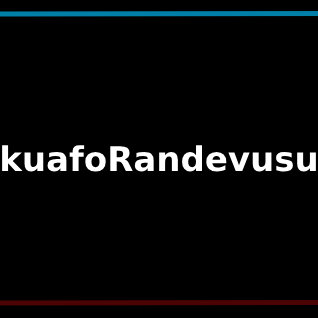
<style>
.page{position:relative;width:318px;height:318px;background:#000000}
.page>*{position:absolute;margin:0}
.t1{font:34px "DejaVuSans-Bold";color:#ffffff}
</style>
<div class="page">
<p class="t1" style="left:2px;top:145px;width:314px;height:27px">kuafoRandevusu</p>
</div>
